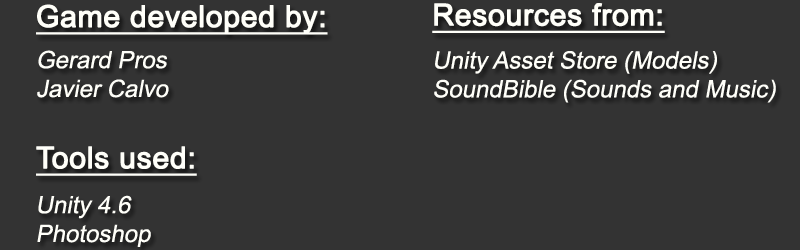
<style>
.page{position:relative;width:800px;height:250px;background:#333333}
.page>*{position:absolute;margin:0}
.t1{font:30px "ArialMT";color:#fffff9;font-weight:bold;text-decoration:underline}
.t2{font:24px "ArialMT";color:#fffff9;font-style:italic}
</style>
<div class="page">
<p class="t1" style="left:36px;top:4px;width:292px;height:31px">Game developed by:</p>
<p class="t1" style="left:432px;top:3px;width:233px;height:30px">Resources from:</p>
<p class="t2" style="left:37px;top:50px;width:132px;height:48px">Gerard Pros<br>Javier Calvo</p>
<p class="t2" style="left:434px;top:51px;width:342px;height:52px">Unity Asset Store (Models)<br>SoundBible (Sounds and Music)</p>
<p class="t1" style="left:36px;top:146px;width:161px;height:30px">Tools used:</p>
<p class="t2" style="left:37px;top:195px;width:114px;height:52px">Unity 4.6<br>Photoshop</p>
</div>
